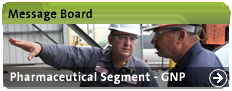
<style>
.page{position:relative;width:232px;height:91px}
.page>*{position:absolute;margin:0}
.t1{font:12px "TheSansVeolia-W5Plain";letter-spacing:0.04em;color:#000000}
.t2{font:12px "TheSansVeolia-W6SemiBold";letter-spacing:0.04em;color:#ffffff}
</style>
<div class="page">
<p class="t1" style="left:8px;top:9px;width:84px;height:12px">Message Board</p>
<p class="t2" style="left:10px;top:72px;width:175px;height:12px">Pharmaceutical Segment - GNP</p>
</div>
